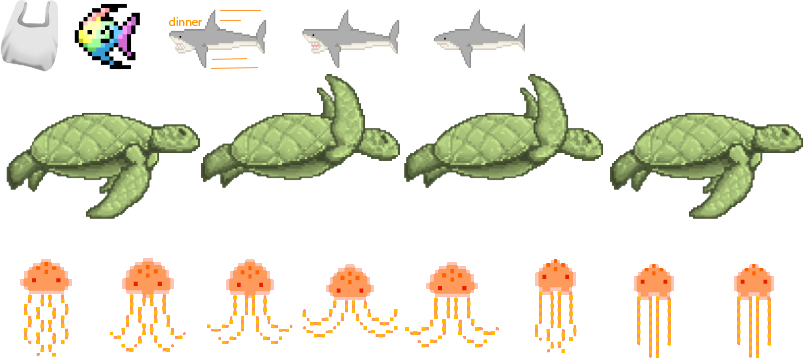
<style>
.page{position:relative;width:807px;height:363px;background:#ffffff}
.page>*{position:absolute;margin:0}
.t1{font:12px "MyriadPro-Regular";color:#ff9900}
</style>
<div class="page">
<p class="t1" style="left:169px;top:17px;width:33px;height:9px">dinner</p>
</div>
